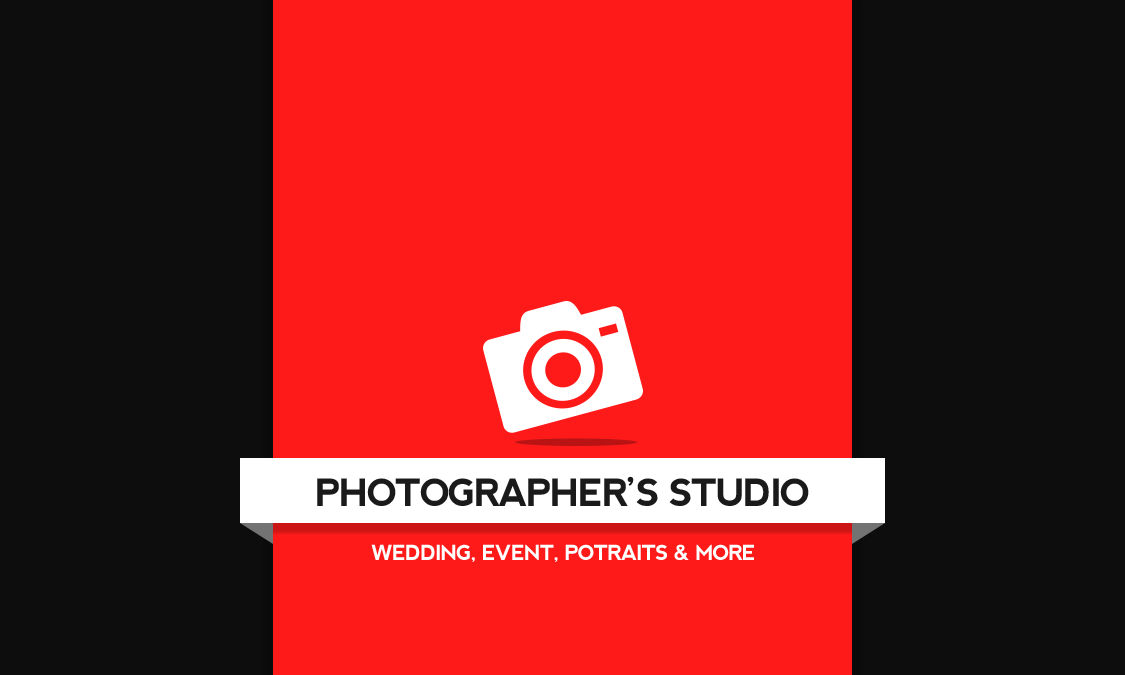
<style>
.page{position:relative;width:1125px;height:675px;background:#0d0d0d}
.page>*{position:absolute;margin:0}
.t1{font:37.5px "nevis-Bold";letter-spacing:-0.05em;color:#1a1a1a;text-transform:uppercase}
.t2{font:20.8px "nevis-Bold";letter-spacing:-0.05em;color:#ffffff;text-transform:uppercase}
</style>
<div class="page">
<p class="t1" style="left:317px;top:476px;width:492px;height:30px">Photographer’s Studio</p>
<p class="t2" style="left:371px;top:544px;width:383px;height:18px">Wedding, Event, Potraits &amp; More</p>
</div>
